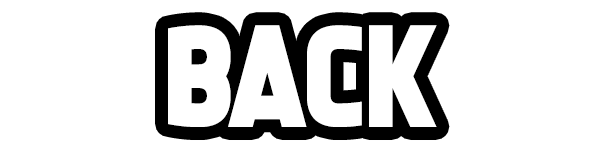
<style>
.page{position:relative;width:600px;height:150px;background:#ffffff}
.page>*{position:absolute;margin:0}
.t1{font:160px "SheSmiles";color:#ffffff}
</style>
<div class="page">
<p class="t1" style="left:168px;top:25px;width:269px;height:102px">back</p>
</div>
